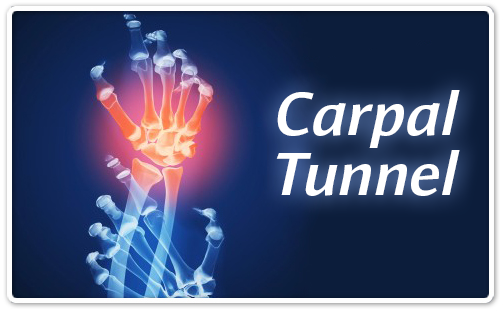
<style>
.page{position:relative;width:503px;height:311px}
.page>*{position:absolute;margin:0}
.t1{font:60px/60px "Impara-MediumItalic";letter-spacing:0.025em;color:#ffffff}
</style>
<div class="page">
<p class="t1" style="left:276px;top:90px;width:184px;height:106px;text-align:right">Carpal<br>Tunnel</p>
</div>
